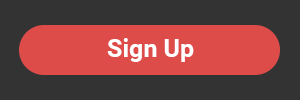
<style>
.page{position:relative;width:300px;height:100px;background:#333333}
.page>*{position:absolute;margin:0}
.t1{font:25px "Roboto-Bold";color:#ffffff}
</style>
<div class="page">
<p class="t1" style="left:107px;top:38px;width:87px;height:24px">Sign Up</p>
</div>
